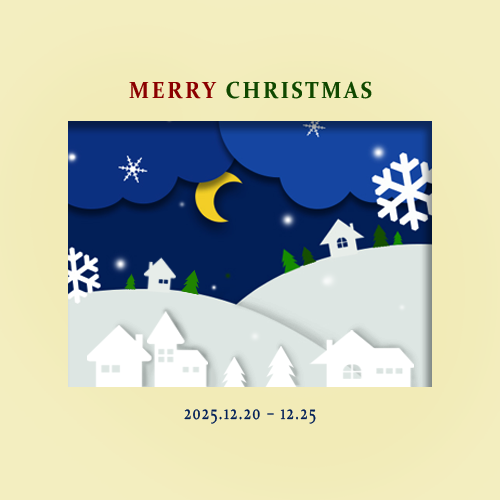
<style>
.page{position:relative;width:500px;height:500px}
.page>*{position:absolute;margin:0}
.t1{font:23.6px "Constantia-Bold";letter-spacing:0.1em;color:#114800;scale:0.93 1}
.t2{font:23.6px "Constantia-Bold";letter-spacing:0.1em;color:#8c0000;scale:0.93 1}
.t3{font:20.4px "Constantia";letter-spacing:0.12em;color:#021f57;scale:0.69 1}
</style>
<div class="page">
<p class="t1" style="left:129px;top:81px;width:243px;height:18px"><span class="t2">MERRY </span>CHRISTMAS</p>
<p class="t3" style="left:184px;top:409px;width:132px;height:15px">2025.12.20 – 12.25</p>
</div>
